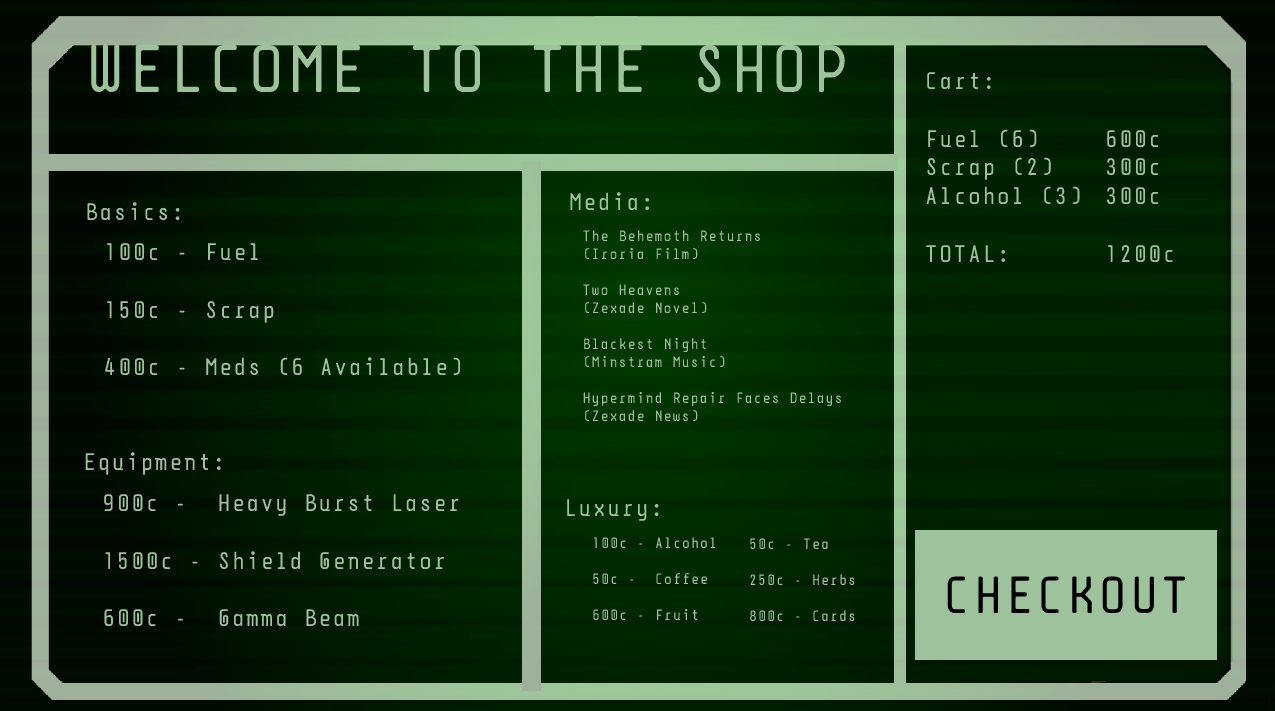
<style>
.page{position:relative;width:1275px;height:711px}
.page>*{position:absolute;margin:0}
.t1{font:67.1px "DPSDbeyond";color:#9ec29c}
.t2{font:24px "DPSDbeyond";color:#9ec29c}
.t3{font:15px "DPSDbeyond";color:#9ec29c}
.t4{font:6px "DPSDbeyond";color:#9ec29c}
.t5{font:52px "DPSDbeyond";color:#000000}
</style>
<div class="page">
<p class="t1" style="left:91px;top:44px;width:754px;height:49px">WELCOME TO THE SHOP</p>
<p class="t2" style="left:926px;top:72px;width:154px;height:190px">Cart:<br><br>Fuel (6)<br>Scrap (2)<br>Alcohol (3)<br><br>TOTAL:</p>
<p class="t2" style="left:1107px;top:130px;width:66px;height:132px">600c<br>300c<br>300c<br><br>1200c</p>
<p class="t2" style="left:570px;top:192px;width:80px;height:19px">Media:</p>
<p class="t2" style="left:87px;top:202px;width:93px;height:19px">Basics:</p>
<p class="t3" style="left:583px;top:230px;width:258px;height:192px"><span class="t4"><br><br></span>The Behemoth Returns<br>(Iroria Film)<br><br>Two Heavens<br>(Zexade Novel)<br><br>Blackest Night<br>(Minstram Music)<br><br>Hypermind Repair Faces Delays<br>(Zexade News)</p>
<p class="t2" style="left:105px;top:243px;width:356px;height:133px">100c - Fuel<br><br>150c - Scrap<br><br>400c - Meds (6 Available)</p>
<p class="t2" style="left:85px;top:452px;width:136px;height:23px">Equipment:</p>
<p class="t2" style="left:104px;top:494px;width:355px;height:133px">900c -  Heavy Burst Laser<br><br>1500c - Shield Generator<br><br>600c -  Gamma Beam</p>
<p class="t2" style="left:567px;top:499px;width:92px;height:22px">Luxury:</p>
<p class="t3" style="left:593px;top:537px;width:123px;height:83px">100c - Alcohol<br><br>50c -  Coffee<br><br>600c - Fruit</p>
<p class="t3" style="left:750px;top:538px;width:105px;height:84px">50c - Tea<br><br>250c - Herbs<br><br>800c - Cards</p>
<p class="t5" style="left:947px;top:576px;width:239px;height:37px">CHECKOUT</p>
</div>
